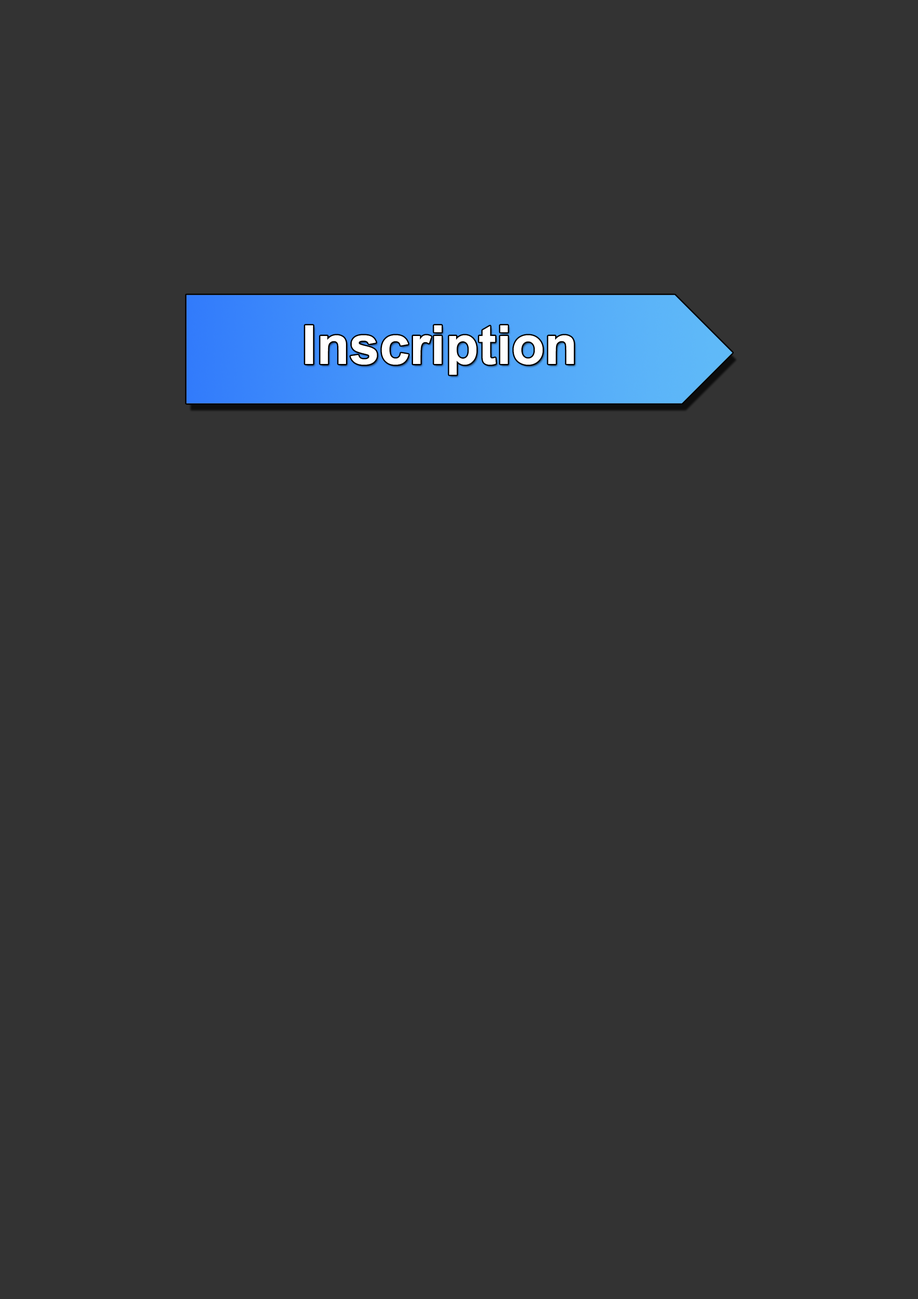
<style>
.page{position:relative;width:918px;height:1299px;background:#333333}
.page>*{position:absolute;margin:0}
.t1{font:54px "Arial-BoldMT";color:#ffffff}
</style>
<div class="page">
<p class="t1" style="left:305px;top:325px;width:269px;height:50px">Inscription</p>
</div>
